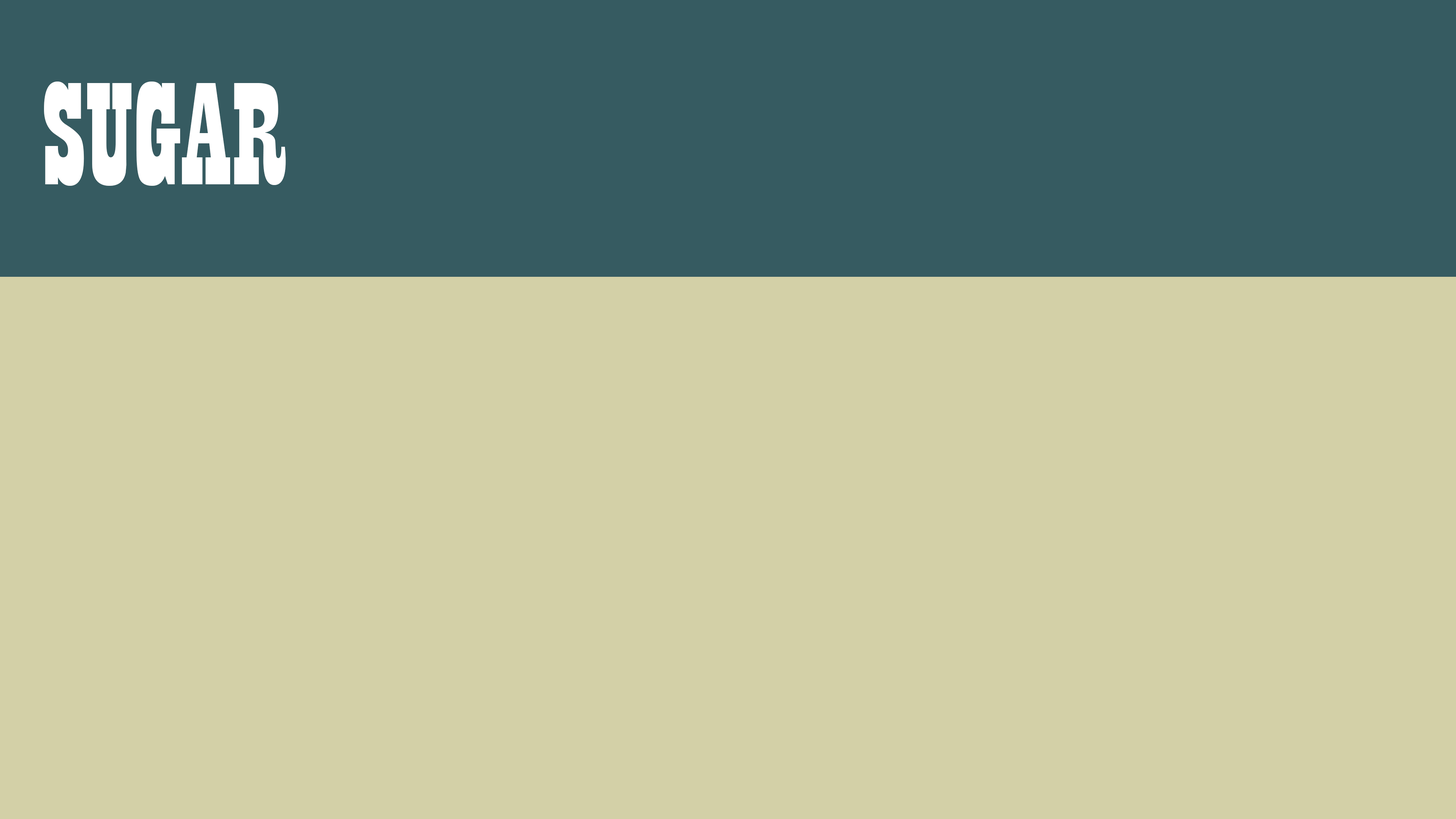
<style>
.page{position:relative;width:1456px;height:819px;background:#d3d0a7}
.page>*{position:absolute;margin:0}
.t1{font:151.7px "Playbill";color:#ffffff}
</style>
<div class="page">
<p class="t1" style="left:44px;top:82px;width:242px;height:104px">SUGAR</p>
</div>
